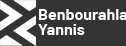
<style>
.page{position:relative;width:126px;height:46px;background:#333333}
.page>*{position:absolute;margin:0}
.t1{font:16px "Barlow-Bold";color:#ffffff}
</style>
<div class="page">
<p class="t1" style="left:39px;top:9px;width:88px;height:11px">Benbourahla</p>
<p class="t1" style="left:38px;top:24px;width:47px;height:11px">Yannis</p>
</div>
